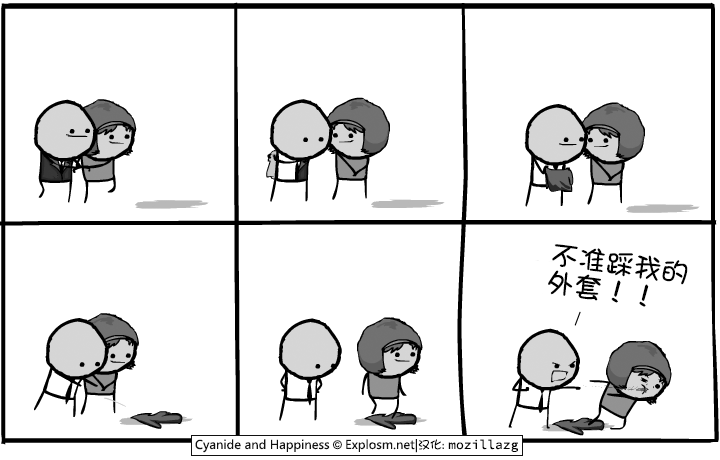
<style>
.page{position:relative;width:720px;height:460px;background:#ffffff}
.page>*{position:absolute;margin:0}
.t1{font:28px/28px "DFShaoNvW5";color:#000000}
</style>
<div class="page">
<p class="t1" style="left:548px;top:244px;width:140px;height:63px;rotate:8deg">不准踩我的<br>外套！！</p>
</div>
